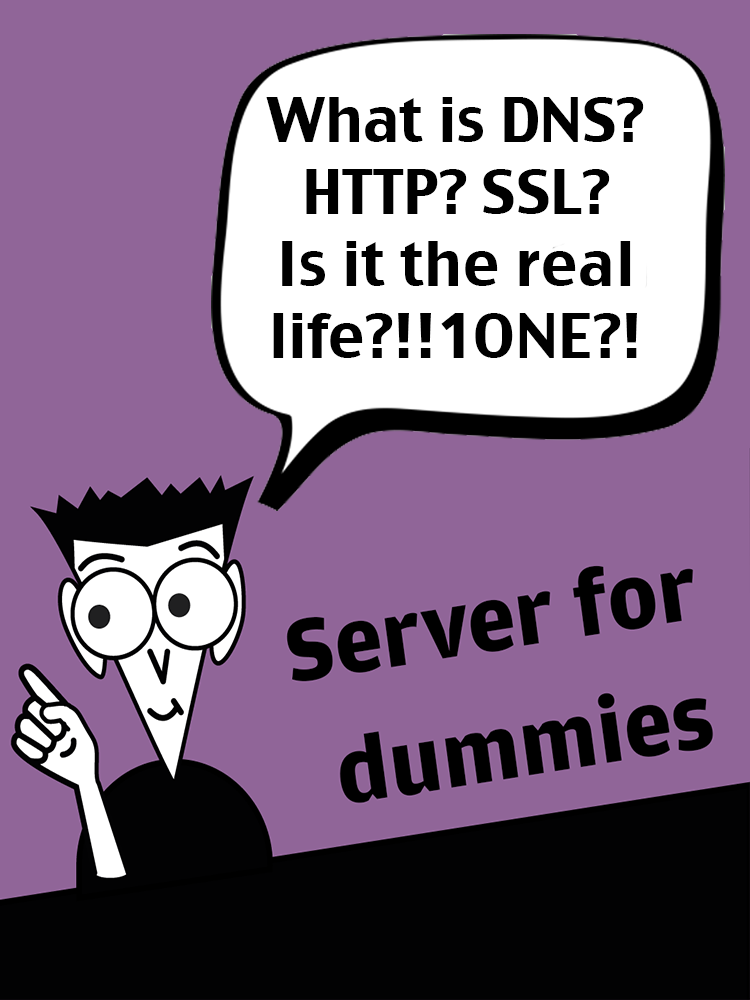
<style>
.page{position:relative;width:750px;height:1000px;background:#906598}
.page>*{position:absolute;margin:0}
.t1{font:60px "CharcoalCY";color:#000000}
</style>
<div class="page">
<p class="t1" style="left:266px;top:97px;width:378px;height:261px;text-align:center">What is DNS?<br>HTTP? SSL? <br>Is it the real life?!!1ONE?!</p>
</div>
